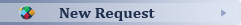
<style>
.page{position:relative;width:241px;height:25px}
.page>*{position:absolute;margin:0}
.t1{font:16px "Cambria-Bold";color:#202f4e}
</style>
<div class="page">
<p class="t1" style="left:59px;top:8px;width:96px;height:13px">New Request</p>
</div>
